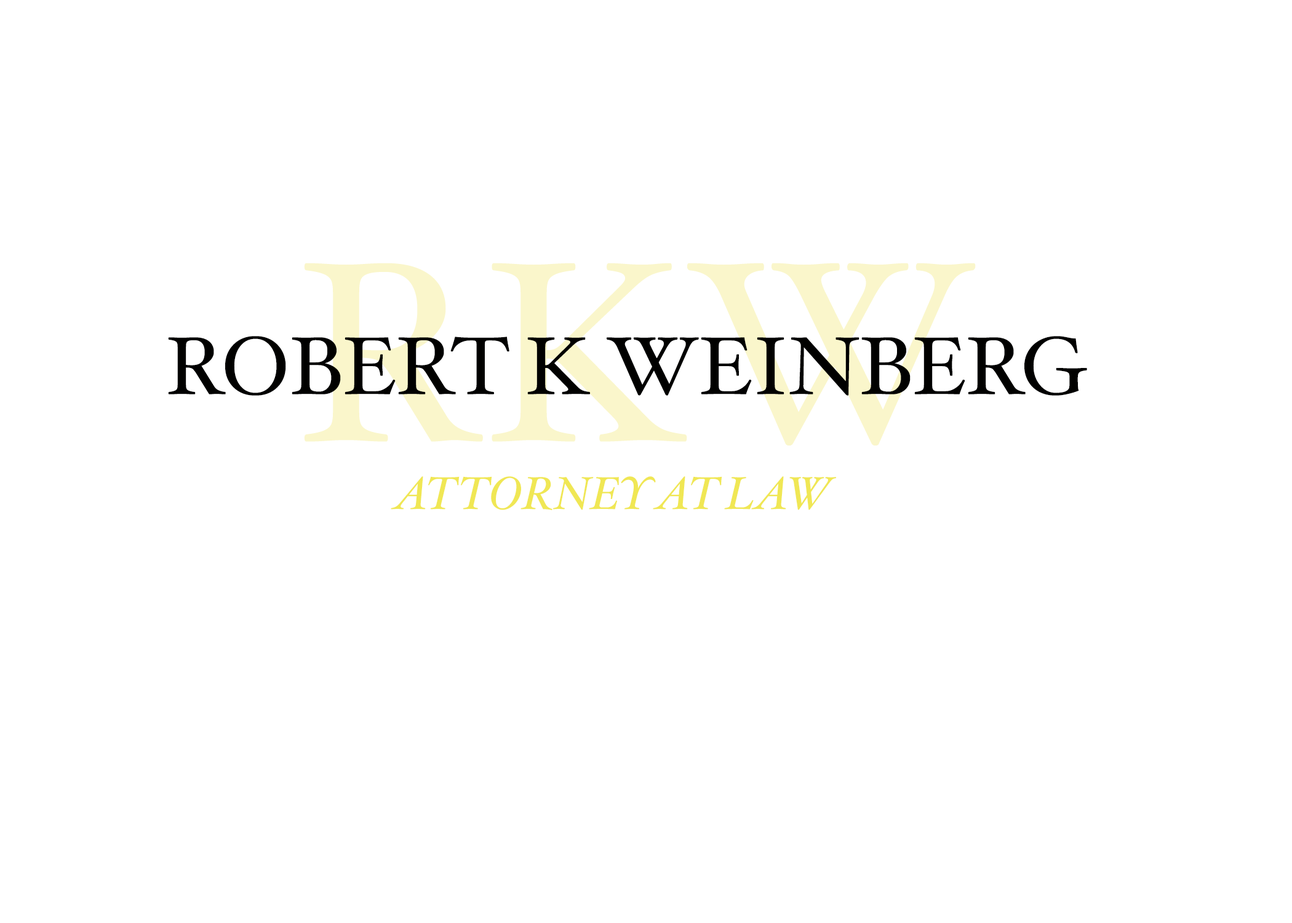
<style>
.page{position:relative;width:1292px;height:923px;background:#ffffff}
.page>*{position:absolute;margin:0}
.t1{font:82px "HoeflerText-Regular";color:#010100}
.t2{font:46.1px "HoeflerText-Italic";color:#f0e754}
</style>
<div class="page">
<p class="t1" style="left:168px;top:336px;width:919px;height:60px">ROBERT K WEINBERG</p>
<p class="t2" style="left:391px;top:476px;width:445px;height:34px">ATTORNEY AT LAW</p>
</div>
